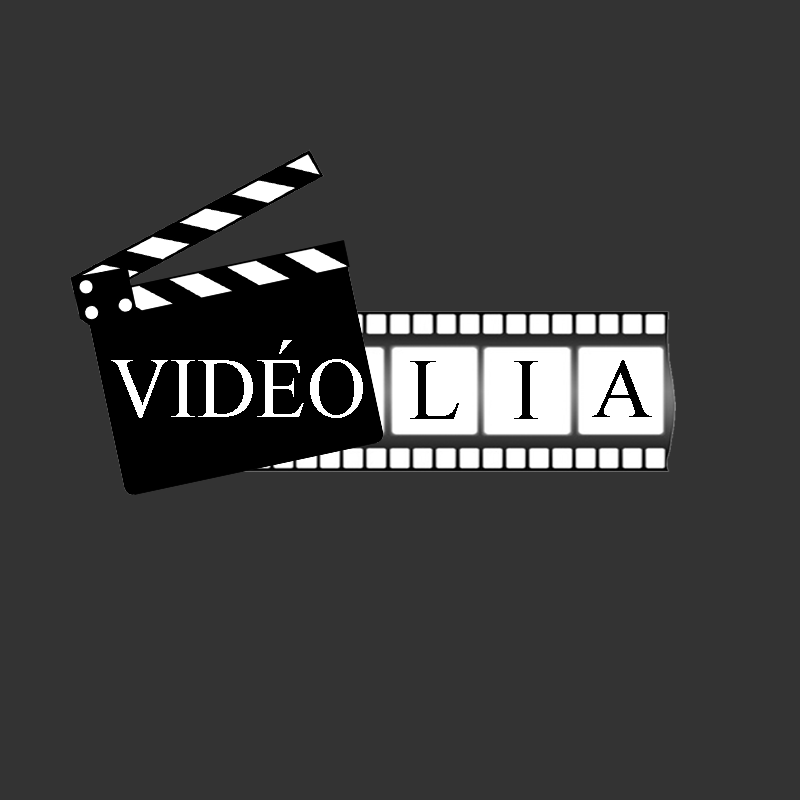
<style>
.page{position:relative;width:800px;height:800px;background:#333333}
.page>*{position:absolute;margin:0}
.t1{font:86.5px "TimesNewRomanPSMT";color:#ffffff;scale:0.95 1}
.t2{font:88.1px "TimesNewRomanPSMT";color:#000000}
.t3{font:88.4px "TimesNewRomanPSMT";color:#000000}
.t4{font:83.7px "TimesNewRomanPSMT";color:#000000}
</style>
<div class="page">
<p class="t1" style="left:111px;top:340px;width:252px;height:78px">VIDÉO</p>
<p class="t2" style="left:410px;top:361px;width:49px;height:58px">L</p>
<p class="t3" style="left:514px;top:361px;width:24px;height:58px">I</p>
<p class="t4" style="left:592px;top:360px;width:60px;height:57px">A</p>
</div>
